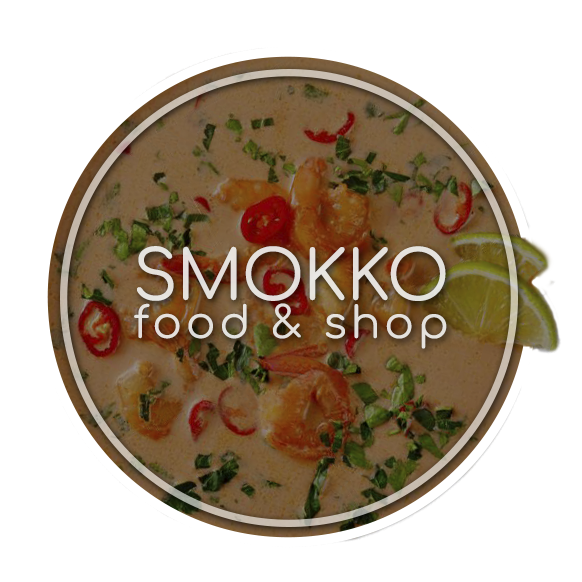
<style>
.page{position:relative;width:582px;height:582px;background:#ffffff}
.page>*{position:absolute;margin:0}
.t1{font:68.1px "Comfortaa-Regular";letter-spacing:-0.02em;color:#e5e1dc}
.t2{font:43.7px "Comfortaa-Regular";letter-spacing:0.09em;color:#e4e1dc}
</style>
<div class="page">
<p class="t1" style="left:137px;top:246px;width:309px;height:55px">SMOKKO</p>
<p class="t2" style="left:134px;top:303px;width:313px;height:46px">food &amp; shop</p>
</div>
